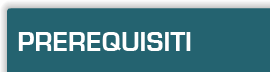
<style>
.page{position:relative;width:270px;height:72px;background:#246370}
.page>*{position:absolute;margin:0}
.t1{font:25px "Square721Demi-Normal";color:#ffffff}
</style>
<div class="page">
<p class="t1" style="left:18px;top:32px;width:173px;height:19px">PREREQUISITI</p>
</div>
